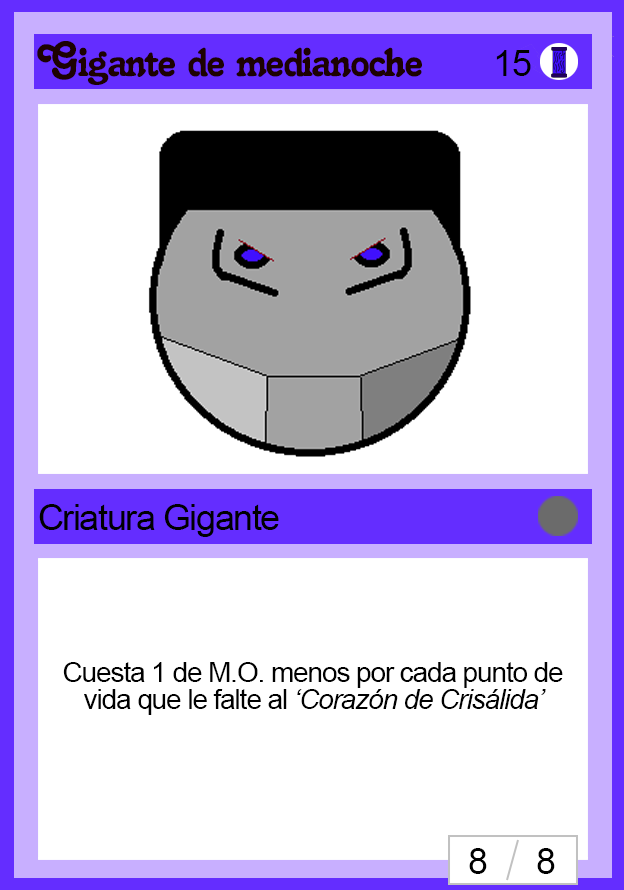
<style>
.page{position:relative;width:624px;height:890px;background:#ffffff}
.page>*{position:absolute;margin:0}
.t1{font:48px "Salina";letter-spacing:-0.04em;color:#1d0202}
.t2{font:36px "ArialMT";letter-spacing:-0.04em;color:#000000}
.t3{font:28px/27px "ArialMT";letter-spacing:-0.04em;color:#000000}
.t4{font:28px/27px "Arial-ItalicMT";letter-spacing:-0.04em;color:#000000}
</style>
<div class="page">
<p class="t1" style="left:37px;top:41px;width:385px;height:44px">Gigante de medianoche</p>
<p class="t2" style="left:496px;top:50px;width:35px;height:26px">15</p>
<p class="t2" style="left:39px;top:504px;width:240px;height:33px">Criatura Gigante</p>
<p class="t3" style="left:63px;top:662px;width:500px;height:53px;text-align:center">Cuesta 1 de M.O. menos por cada punto de vida que le falte al <span class="t4">‘Corazón de Crisálida’</span></p>
<p class="t2" style="left:469px;top:848px;width:18px;height:26px">8</p>
<p class="t2" style="left:537px;top:848px;width:18px;height:26px">8</p>
</div>
